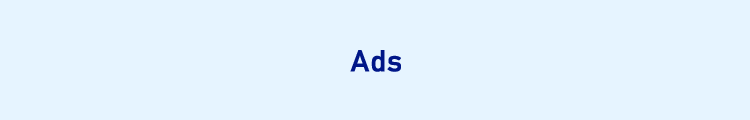
<style>
.page{position:relative;width:750px;height:120px;background:#e6f4ff}
.page>*{position:absolute;margin:0}
.t1{font:29.4px "Bahnschrift";color:#001688;font-weight:bold}
</style>
<div class="page">
<p class="t1" style="left:350px;top:50px;width:51px;height:22px">Ads</p>
</div>
